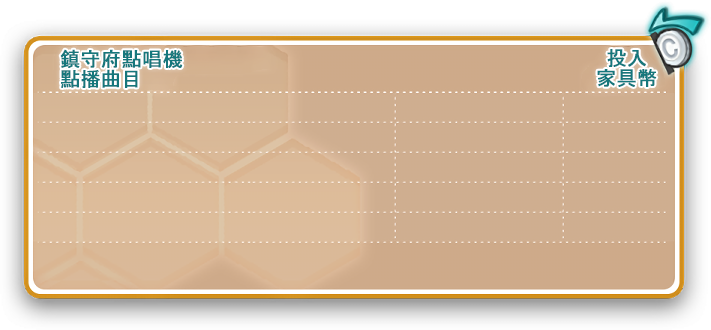
<style>
.page{position:relative;width:711px;height:330px}
.page>*{position:absolute;margin:0}
.t1{font:20px/20px "MS-UIGothic";color:#16777c;font-weight:bold}
</style>
<div class="page">
<p class="t1" style="left:60px;top:49px;width:123px;height:39px">鎮守府點唱機<br>點播曲目</p>
<p class="t1" style="left:597px;top:49px;width:60px;height:38px;text-align:center">投入<br>家具幣</p>
</div>
